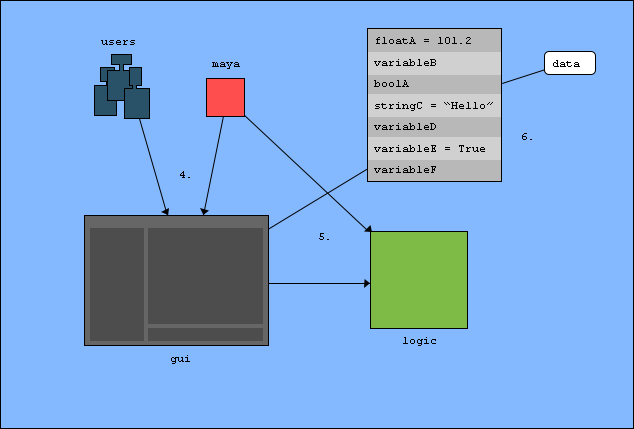
<style>
.page{position:relative;width:634px;height:429px;background:#84b8ff}
.page>*{position:absolute;margin:0}
.t1{font:11px "CourierNewPSMT";color:#000000}
</style>
<div class="page">
<p class="t1" style="left:101px;top:40px;width:34px;height:5px">users</p>
<p class="t1" style="left:376px;top:37px;width:95px;height:7px">floatA = 101.2</p>
<p class="t1" style="left:212px;top:62px;width:28px;height:7px">maya</p>
<p class="t1" style="left:374px;top:59px;width:62px;height:7px">variableB</p>
<p class="t1" style="left:553px;top:60px;width:27px;height:7px">data</p>
<p class="t1" style="left:374px;top:80px;width:35px;height:7px">boolA</p>
<p class="t1" style="left:375px;top:102px;width:118px;height:9px">stringC = “Hello”</p>
<p class="t1" style="left:374px;top:123px;width:62px;height:7px">variableD</p>
<p class="t1" style="left:522px;top:133px;width:10px;height:7px">6.</p>
<p class="t1" style="left:374px;top:145px;width:111px;height:7px">variableE = True</p>
<p class="t1" style="left:180px;top:171px;width:10px;height:7px">4.</p>
<p class="t1" style="left:374px;top:166px;width:62px;height:7px">variableF</p>
<p class="t1" style="left:319px;top:233px;width:10px;height:7px">5.</p>
<p class="t1" style="left:403px;top:337px;width:33px;height:9px">logic</p>
<p class="t1" style="left:171px;top:355px;width:19px;height:9px">gui</p>
</div>
